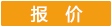
<style>
.page{position:relative;width:112px;height:27px;background:#f39c12}
.page>*{position:absolute;margin:0}
.t1{font:17px "MicrosoftYaHei";letter-spacing:1.02em;color:#ffffff;font-weight:bold}
</style>
<div class="page">
<p class="t1" style="left:30px;top:5px;width:53px;height:18px">报价</p>
</div>
